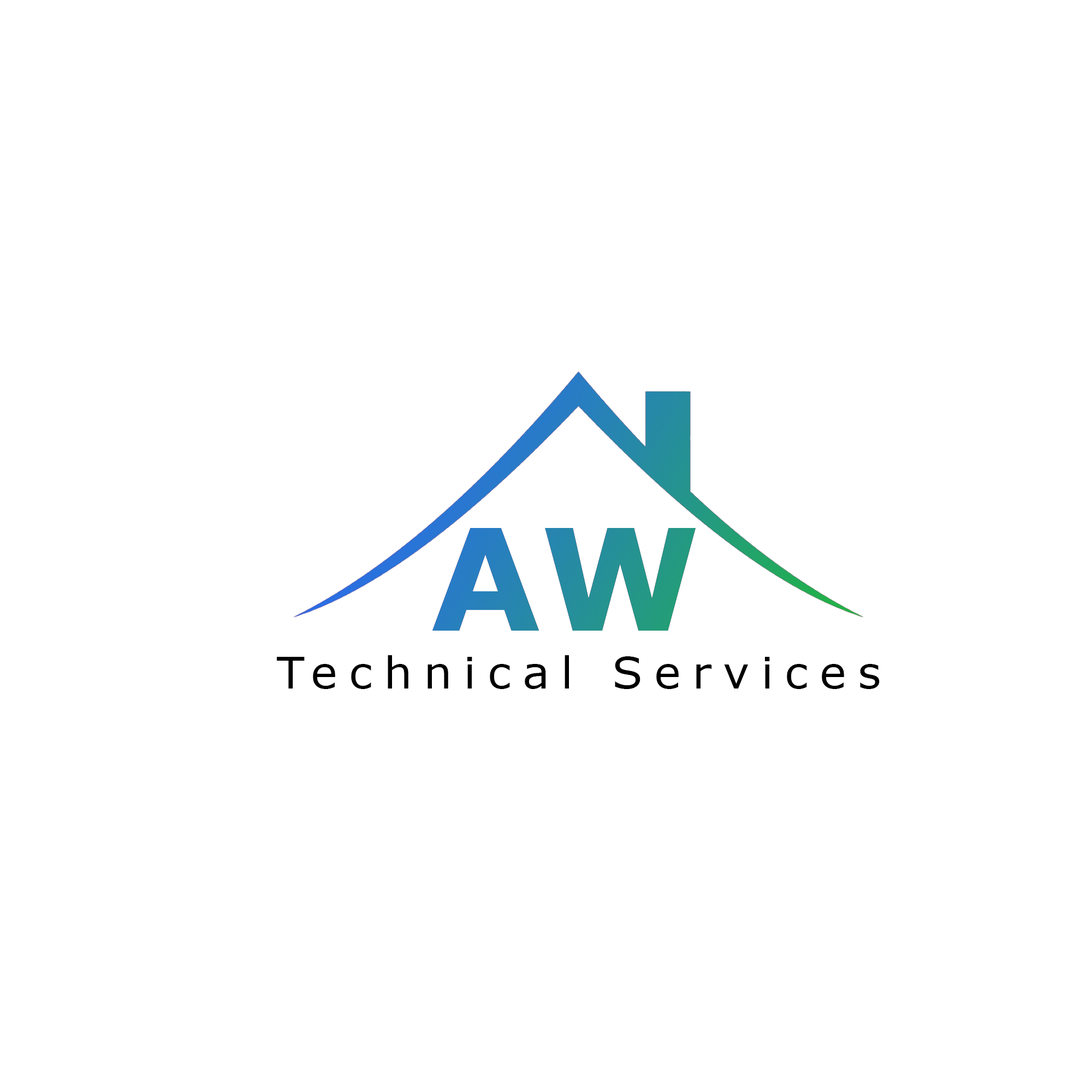
<style>
.page{position:relative;width:1092px;height:1092px;background:#ffffff}
.page>*{position:absolute;margin:0}
.t1{font:43.9px "Verdana";letter-spacing:0.26em;color:#000000}
</style>
<div class="page">
<p class="t1" style="left:277px;top:655px;width:603px;height:34px">Technical Services</p>
</div>
